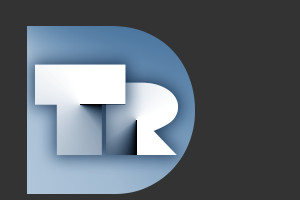
<style>
.page{position:relative;width:300px;height:200px;background:#333333}
.page>*{position:absolute;margin:0}
.t1{font:150px "DiscoDeck"}
.t2{font:120px "DiscoDeck"}
</style>
<div class="page">
<p class="t1" style="left:35px;top:64px;width:91px;height:91px">T</p>
<p class="t2" style="left:106px;top:82px;width:72px;height:73px">R</p>
</div>
